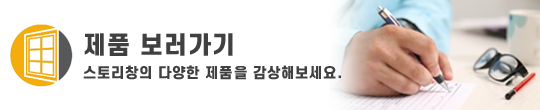
<style>
.page{position:relative;width:540px;height:110px;background:#ffffff}
.page>*{position:absolute;margin:0}
.t1{font:24px "S-CoreDream-8Heavy";letter-spacing:0.05em;color:#404040}
.t2{font:14px "S-CoreDream-8Heavy";letter-spacing:0.05em;color:#404040}
</style>
<div class="page">
<p class="t1" style="left:84px;top:33px;width:149px;height:23px">제품 보러가기</p>
<p class="t2" style="left:83px;top:65px;width:258px;height:15px">스토리창의 다양한 제품을 감상해보세요.</p>
</div>
